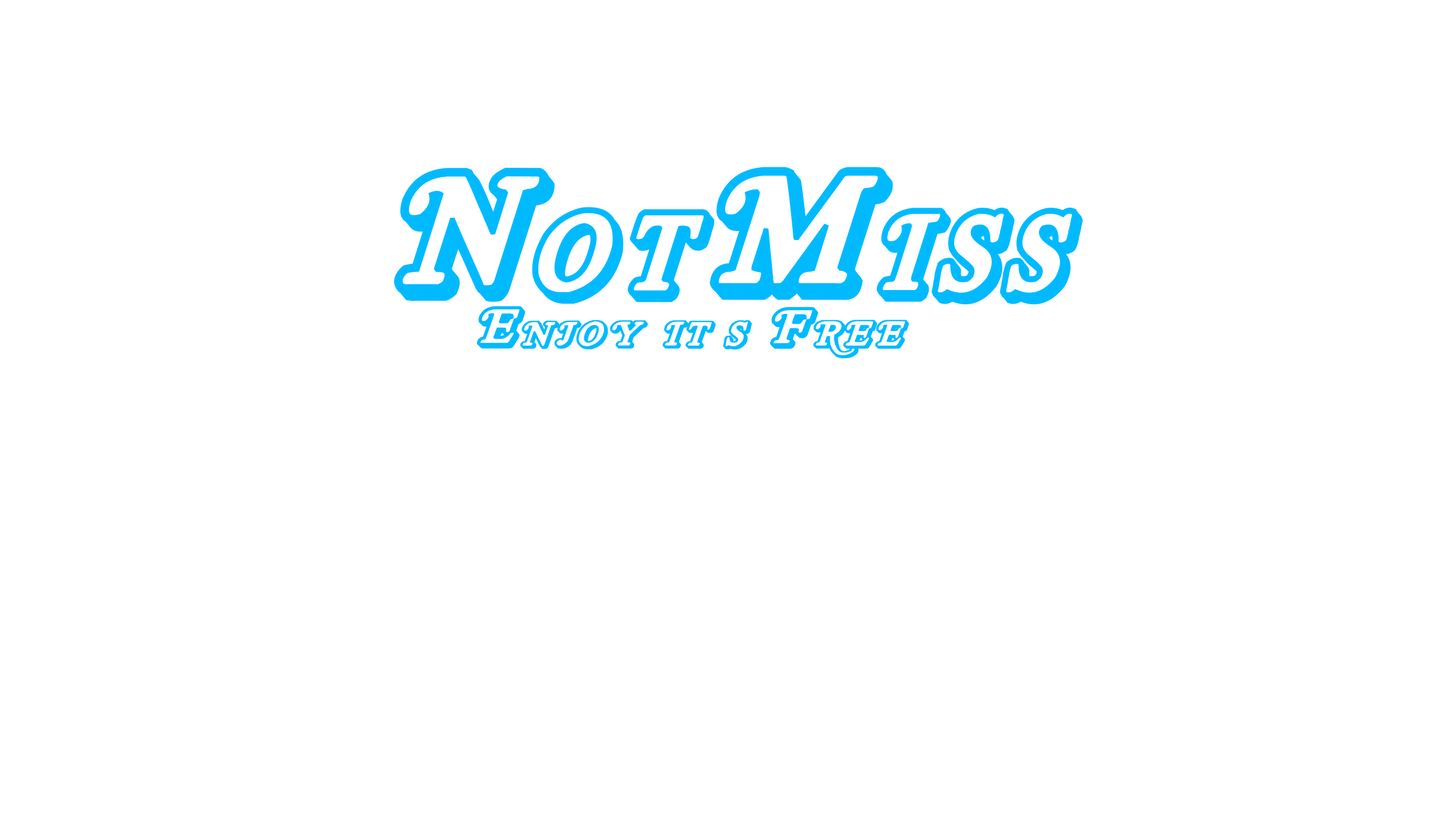
<style>
.page{position:relative;width:1456px;height:819px;background:#ffffff}
.page>*{position:absolute;margin:0}
.t1{font:170.6px "RoyalAcidbath";color:#01bafe;font-variant:small-caps;font-weight:bold;font-style:italic}
.t2{font:52.5px "RoyalAcidbath";color:#01bafe;font-variant:small-caps;font-weight:bold;font-style:italic;scale:1.12 1}
</style>
<div class="page">
<p class="t1" style="left:394px;top:167px;width:689px;height:138px">NotMiss</p>
<p class="t2" style="left:477px;top:306px;width:432px;height:52px">Enjoy it’s Free</p>
</div>
